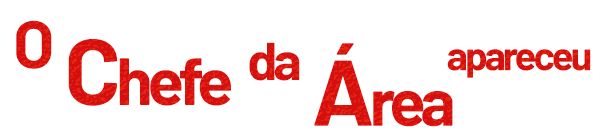
<style>
.page{position:relative;width:607px;height:139px;background:#ffffff}
.page>*{position:absolute;margin:0}
.t1{font:66.7px "Barlow-Bold";color:#d50e0f}
.t2{font:66.7px "Barlow-Bold";letter-spacing:-0.075em;color:#d50e0f}
.t3{font:93.3px "Barlow-Bold";letter-spacing:-0.05em;color:#d50e0f}
.t4{font:53.3px "Barlow-Bold";letter-spacing:-0.075em;color:#d50e0f}
.t5{font:40px "Barlow-Bold";letter-spacing:-0.075em;color:#d50e0f}
</style>
<div class="page">
<p class="t1" style="left:16px;top:20px;width:36px;height:49px">O</p>
<p class="t2" style="left:68px;top:39px;width:163px;height:67px"><span class="t3">C</span>hefe</p>
<p class="t4" style="left:249px;top:42px;width:51px;height:39px">da</p>
<p class="t2" style="left:314px;top:43px;width:139px;height:84px"><span class="t3">Á</span>rea</p>
<p class="t5" style="left:447px;top:49px;width:144px;height:29px">apareceu</p>
</div>
